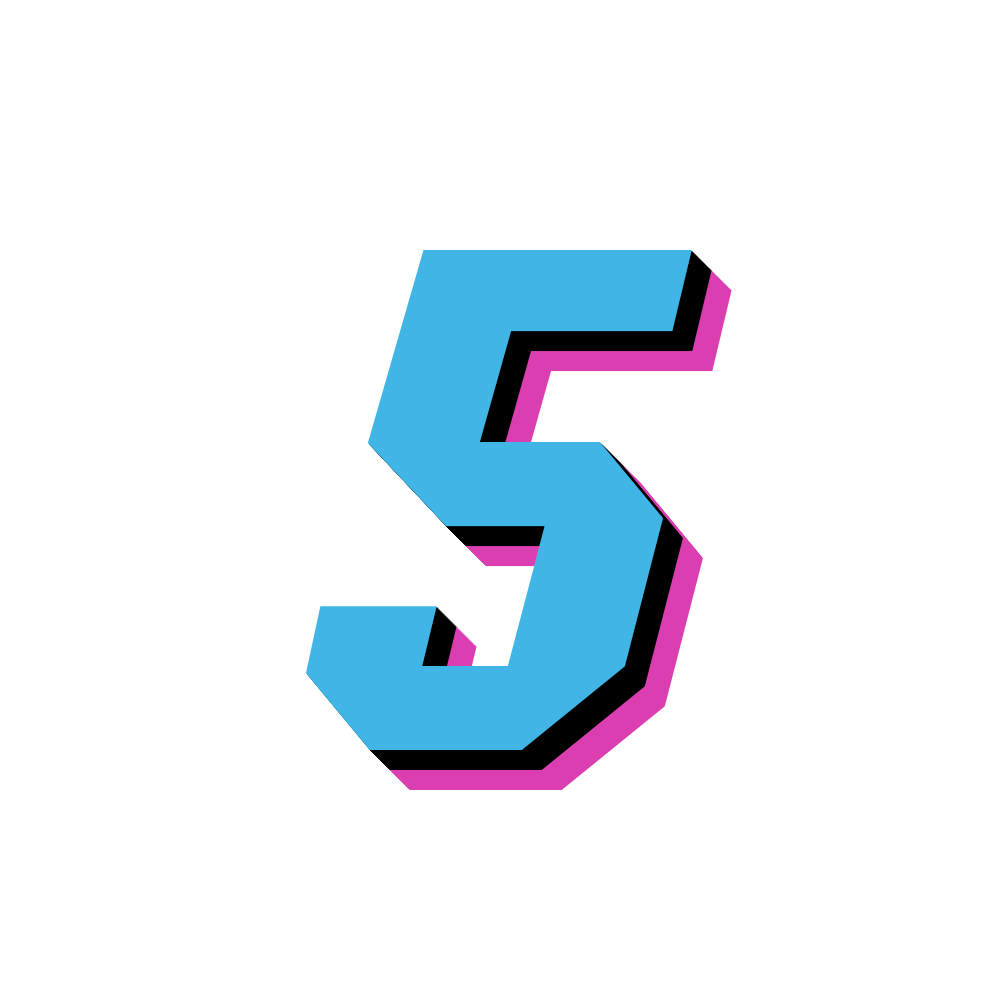
<style>
.page{position:relative;width:1000px;height:1000px;background:#ffffff}
.page>*{position:absolute;margin:0}
.t1{font:625px "NBAHeat";color:#41b6e6}
</style>
<div class="page">
<p class="t1" style="left:306px;top:250px;width:386px;height:500px">5</p>
</div>
